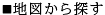
<style>
.page{position:relative;width:105px;height:15px;background:#ffffff}
.page>*{position:absolute;margin:0}
.t1{font:14px "KozMinPro-ExtraLight";letter-spacing:0.19em;color:#010101}
.t2{font:10px "KozMinPro-ExtraLight";letter-spacing:0.19em;color:#010101}
</style>
<div class="page">
<p class="t1" style="left:2px;top:2px;width:101px;height:14px"><span class="t2">■</span>地図から探す</p>
</div>
